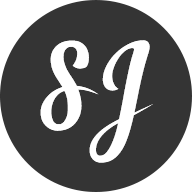
<style>
.page{position:relative;width:192px;height:192px;background:#343434}
.page>*{position:absolute;margin:0}
.t1{font:121.8px "Anydore";letter-spacing:0.025em;color:#ffffff;text-transform:uppercase}
</style>
<div class="page">
<p class="t1" style="left:40px;top:40px;width:113px;height:123px">Sj</p>
</div>
